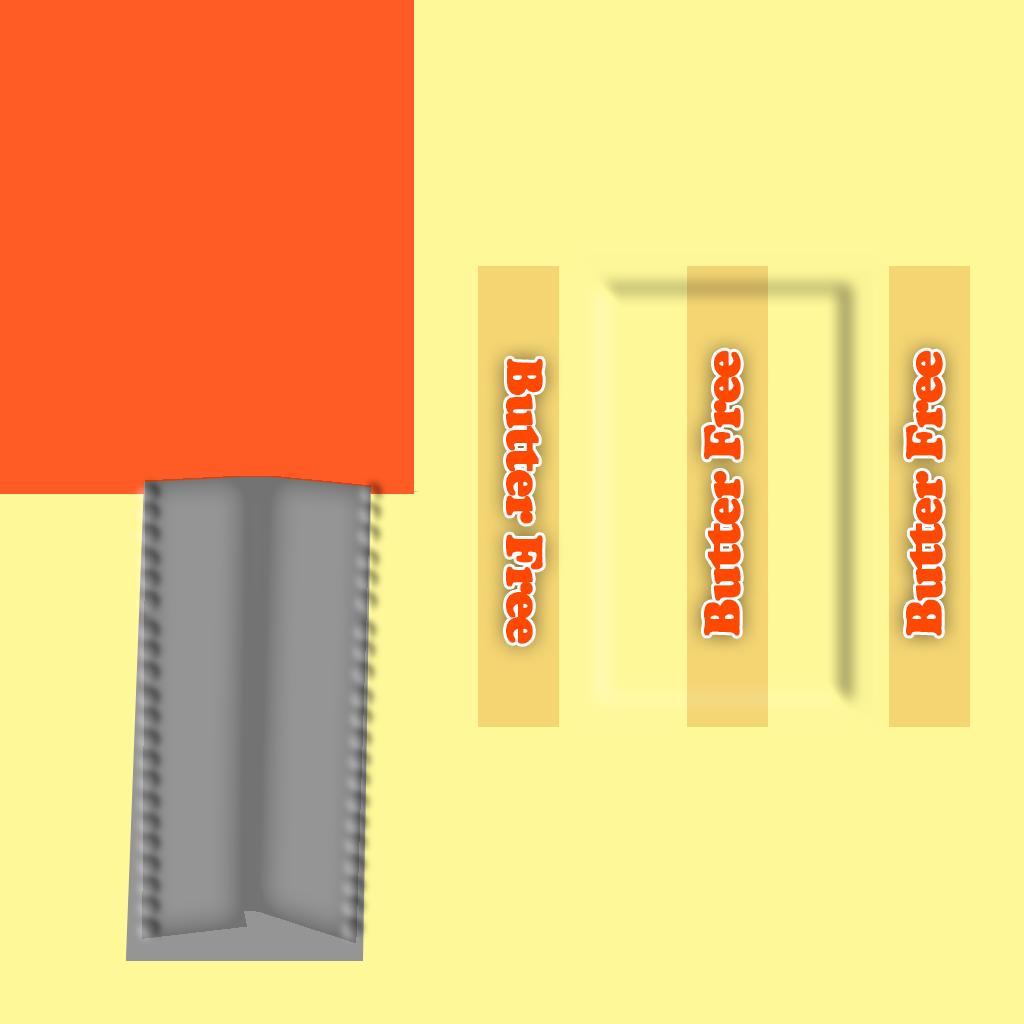
<style>
.page{position:relative;width:1024px;height:1024px;background:#fff899}
.page>*{position:absolute;margin:0}
.t1{font:48.2px "CooperBlackStd";letter-spacing:-0.06em;color:#ff4800;font-weight:bold}
</style>
<div class="page">
<p class="t1" style="left:704px;top:350px;width:37px;height:286px;rotate:-90deg">Butter Free</p>
<p class="t1" style="left:906px;top:350px;width:37px;height:286px;rotate:-90deg">Butter Free</p>
<p class="t1" style="left:506px;top:358px;width:37px;height:286px;rotate:90deg">Butter Free</p>
</div>
